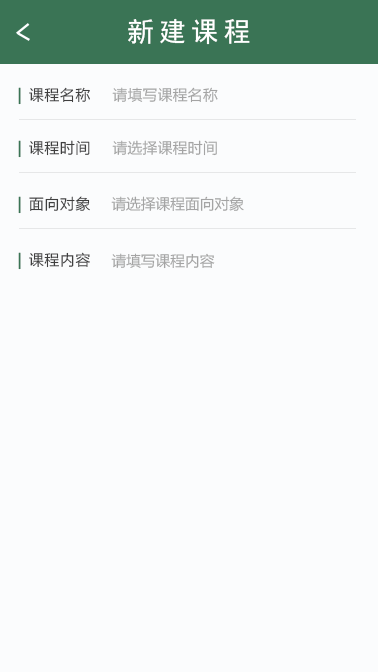
<style>
.page{position:relative;width:378px;height:672px;background:#fbfcfd}
.page>*{position:absolute;margin:0}
.t1{font:26.7px "SimHei";letter-spacing:0.2em;color:#ffffff}
.t2{font:14.7px "MicrosoftYaHei";letter-spacing:0.05em;color:#3f3f3f}
.t3{font:14.7px "MicrosoftYaHei";letter-spacing:0.1em;color:#3a7455;font-weight:bold}
.t4{font:14.7px "MicrosoftYaHei";letter-spacing:0.025em;color:#a4a4a4}
.t5{font:14.7px "MicrosoftYaHei";color:#a4a4a4}
</style>
<div class="page">
<p class="t1" style="left:128px;top:18px;width:122px;height:27px">新建课程</p>
<p class="t2" style="left:18px;top:87px;width:72px;height:18px"><span class="t3">| </span>课程名称</p>
<p class="t4" style="left:112px;top:87px;width:106px;height:16px">请填写课程名称</p>
<p class="t2" style="left:18px;top:140px;width:72px;height:18px"><span class="t3">| </span>课程时间</p>
<p class="t4" style="left:112px;top:140px;width:105px;height:16px">请选择课程时间</p>
<p class="t2" style="left:18px;top:196px;width:72px;height:18px"><span class="t3">| </span>面向对象</p>
<p class="t5" style="left:111px;top:196px;width:133px;height:16px">请选择课程面向对象</p>
<p class="t2" style="left:18px;top:252px;width:72px;height:18px"><span class="t3">| </span>课程内容</p>
<p class="t5" style="left:111px;top:253px;width:104px;height:16px">请填写课程内容</p>
</div>
